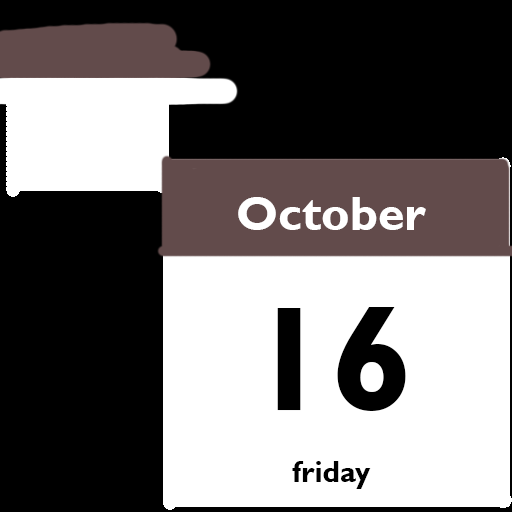
<style>
.page{position:relative;width:512px;height:512px;background:#000000}
.page>*{position:absolute;margin:0}
.t1{font:48px "GillSansMT-Bold";color:#ffffff}
.t2{font:150px "GillSansMT-Bold";color:#000000}
.t3{font:30px "GillSansMT-Bold";color:#000000}
</style>
<div class="page">
<p class="t1" style="left:238px;top:197px;width:188px;height:292px;text-align:center">October<br><span class="t2">16<br></span><span class="t3"><br>friday</span></p>
</div>
